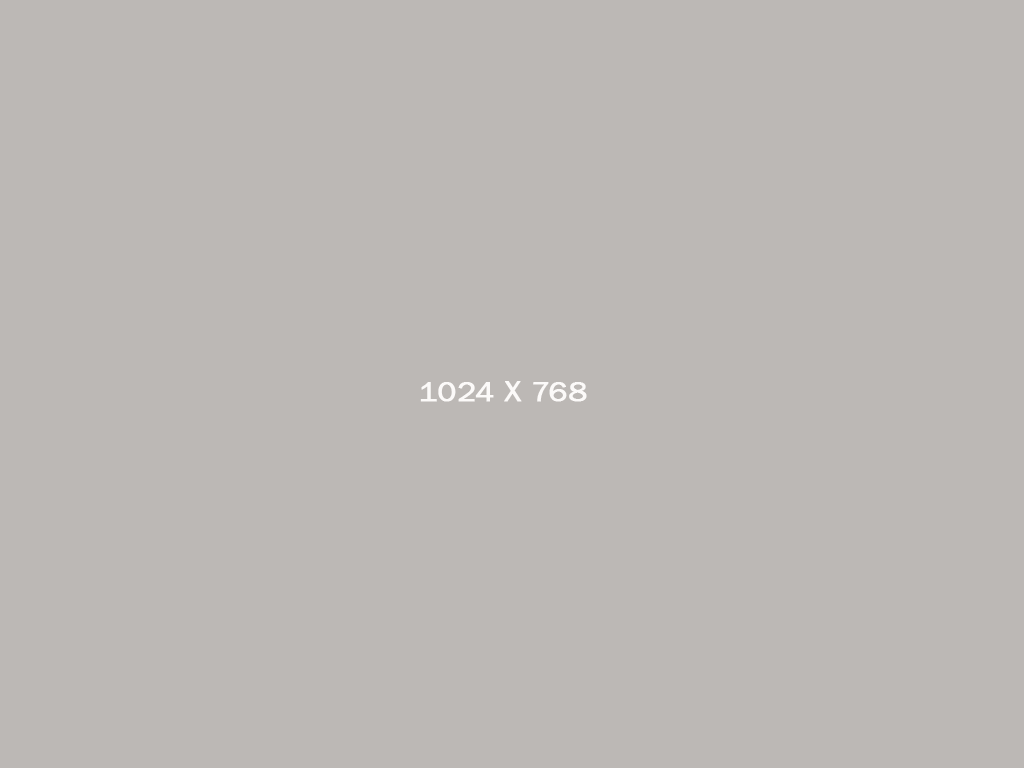
<style>
.page{position:relative;width:1024px;height:768px;background:#bcb8b5}
.page>*{position:absolute;margin:0}
.t1{font:28.5px "FranklinGothic-Book";color:#fcfaf9;font-weight:bold;scale:1.13 1}
</style>
<div class="page">
<p class="t1" style="left:420px;top:381px;width:167px;height:21px">1024 X 768</p>
</div>
